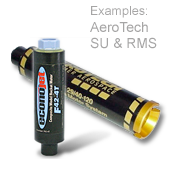
<style>
.page{position:relative;width:175px;height:170px;background:#ffffff}
.page>*{position:absolute;margin:0}
.t1{font:13.9px "ArialMT";color:#a6a5a5}
.t2{font:12.5px "ArialMT";color:#a6a5a5}
</style>
<div class="page">
<p class="t1" style="left:90px;top:6px;width:67px;height:43px"><span class="t2">Examples:<br></span>AeroTech<br>SU &amp; RMS</p>
</div>
